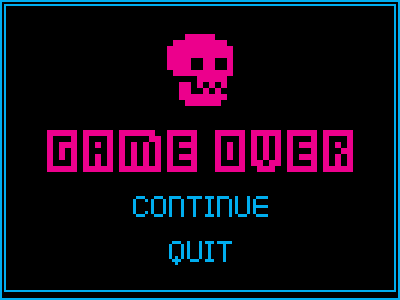
<style>
.page{position:relative;width:400px;height:300px;background:#000000}
.page>*{position:absolute;margin:0}
.t1{font:48px "Kenney-Blocks";color:#ec008c;text-transform:uppercase}
.t2{font:48px "Kenney-Pixel";color:#00aeef;text-transform:uppercase}
.t3{font:48px/45px "Kenney-Pixel";color:#00aeef;text-transform:uppercase}
</style>
<div class="page">
<p class="t1" style="left:47px;top:130px;width:306px;height:42px">Game Over</p>
<p class="t2" style="left:133px;top:196px;width:135px;height:69px;text-align:center">continue<br><span class="t3">quit</span></p>
</div>
